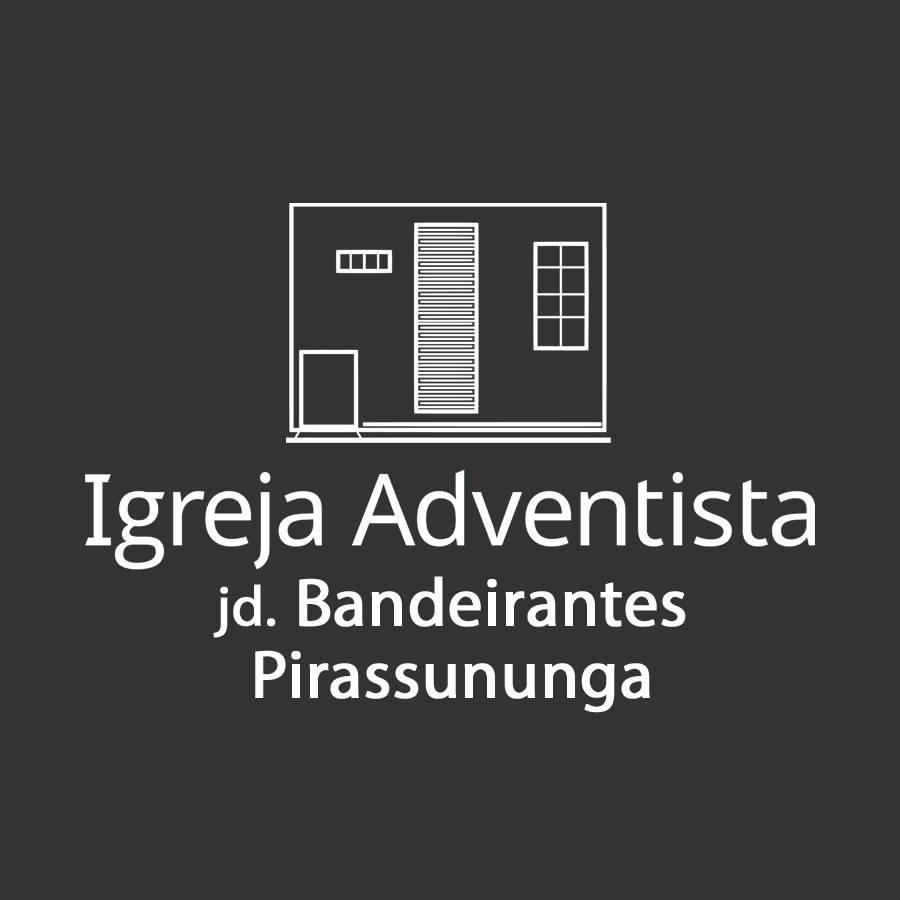
<style>
.page{position:relative;width:900px;height:900px;background:#333333}
.page>*{position:absolute;margin:0}
.t1{font:68.3px/72.1px "MyriadPro-Regular";color:#ffffff;font-weight:bold}
.t2{font:56.9px/72.1px "MyriadPro-Regular";color:#ffffff;font-weight:bold}
</style>
<div class="page">
<p class="t1" style="left:213px;top:576px;width:473px;height:137px;text-align:center"><span class="t2">jd.</span> Bandeirantes<br>Pirassununga</p>
</div>
